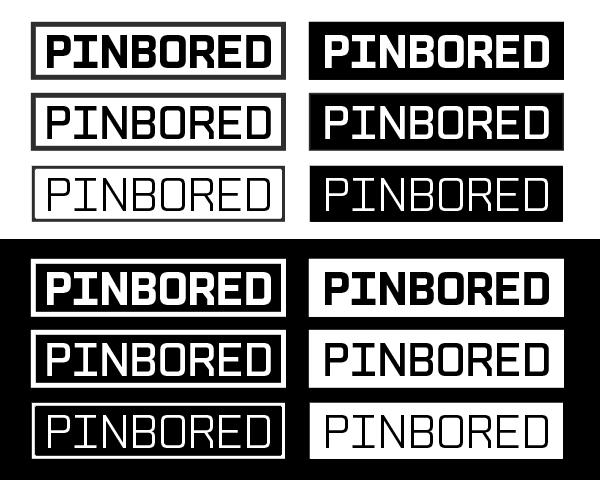
<style>
.page{position:relative;width:600px;height:480px;background:#ffffff}
.page>*{position:absolute;margin:0}
.t1{font:48px "CPMono-Bold";letter-spacing:-0.05em;color:#000000}
.t2{font:48px "CPMono-Bold";letter-spacing:-0.05em;color:#ffffff}
.t3{font:48px "CPMono-Plain";letter-spacing:-0.05em;color:#000000}
.t4{font:48px "CPMono-Plain";letter-spacing:-0.05em;color:#ffffff}
.t5{font:48px "CPMono-Light";letter-spacing:-0.05em;color:#000000}
.t6{font:48px "CPMono-Light";letter-spacing:-0.05em;color:#ffffff}
</style>
<div class="page">
<p class="t1" style="left:47px;top:35px;width:224px;height:33px">PINBORED</p>
<p class="t2" style="left:325px;top:35px;width:224px;height:33px">PINBORED</p>
<p class="t3" style="left:47px;top:106px;width:224px;height:33px">PINBORED</p>
<p class="t4" style="left:325px;top:106px;width:224px;height:33px">PINBORED</p>
<p class="t5" style="left:48px;top:178px;width:222px;height:33px">PINBORED</p>
<p class="t6" style="left:326px;top:178px;width:222px;height:33px">PINBORED</p>
<p class="t2" style="left:47px;top:272px;width:224px;height:33px">PINBORED</p>
<p class="t1" style="left:325px;top:272px;width:224px;height:33px">PINBORED</p>
<p class="t4" style="left:47px;top:343px;width:224px;height:33px">PINBORED</p>
<p class="t3" style="left:325px;top:343px;width:224px;height:33px">PINBORED</p>
<p class="t6" style="left:48px;top:415px;width:222px;height:33px">PINBORED</p>
<p class="t5" style="left:326px;top:415px;width:222px;height:33px">PINBORED</p>
</div>
